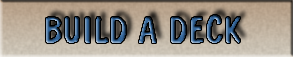
<style>
.page{position:relative;width:293px;height:57px}
.page>*{position:absolute;margin:0}
.t1{font:39.9px "Dominion"}
</style>
<div class="page">
<p class="t1" style="left:46px;top:15px;width:194px;height:28px">BUILD A DECK</p>
</div>
